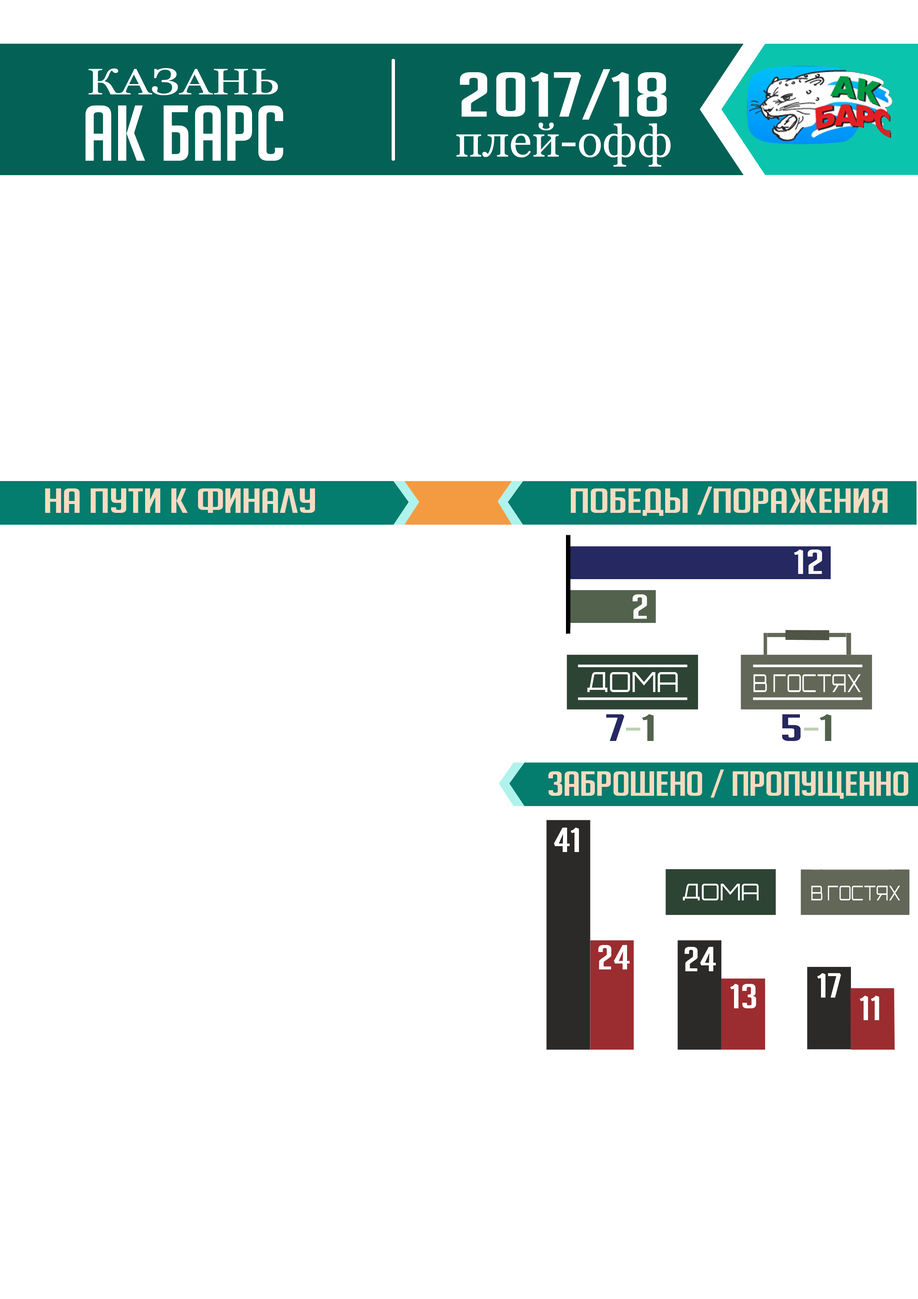
<style>
.page{position:relative;width:918px;height:1299px;background:#ffffff}
.page>*{position:absolute;margin:0}
.t1{font:37px "Georgia";color:#ffffff;scale:1.28 1}
.t2{font:37px "Georgia";color:#ffffff;scale:1.22 1}
.t3{font:61.7px "BigNoodleTitlingCyr";color:#ffffff;scale:1.57 1}
.t4{font:77.1px "BigNoodleTitlingCyr";color:#ffffff;scale:1.1 1}
.t5{font:46.3px "Georgia";color:#ffffff}
.t6{font:33.9px "BigNoodleTitlingCyr";color:#f7dbc0;scale:1.51 1}
.t7{font:33.9px "BigNoodleTitlingCyr";color:#fafafa;scale:1.51 1}
.t8{font:27.8px "Orbitron-Regular";color:#ffffff}
.t9{font:24.7px "Orbitron-Regular";color:#ffffff;scale:0.75 1}
.t10{font:37px "BigNoodleTitlingCyr";color:#262861;scale:1.75 1}
.t11{font:37px "BigNoodleTitlingCyr";color:#bdd0b5;scale:1.75 1}
.t12{font:37px "BigNoodleTitlingCyr";color:#53624d;scale:1.75 1}
.t13{font:33.9px "BigNoodleTitlingCyr";color:#f7dbc0;scale:1.35 1}
.t14{font:33.9px "BigNoodleTitlingCyr";color:#ffffff;scale:1.35 1}
</style>
<div class="page">
<p class="t1" style="left:88px;top:68px;width:190px;height:27px">КАЗАН<span class="t2">Ь</span></p>
<p class="t3" style="left:460px;top:69px;width:207px;height:51px">2017/18</p>
<p class="t4" style="left:86px;top:105px;width:197px;height:56px">АК БАРС</p>
<p class="t5" style="left:456px;top:123px;width:215px;height:44px">плей-офф</p>
<p class="t6" style="left:45px;top:488px;width:270px;height:25px">на пути к финалу</p>
<p class="t6" style="left:571px;top:486px;width:317px;height:30px">победы /поражения</p>
<p class="t7" style="left:794px;top:549px;width:28px;height:25px">12</p>
<p class="t7" style="left:633px;top:594px;width:14px;height:25px">2</p>
<p class="t8" style="left:587px;top:672px;width:91px;height:20px">ДОМА</p>
<p class="t9" style="left:753px;top:674px;width:108px;height:18px">В ГОСТЯХ</p>
<p class="t10" style="left:606px;top:714px;width:48px;height:27px">7<span class="t11">-</span><span class="t12">1</span></p>
<p class="t10" style="left:782px;top:714px;width:50px;height:27px">5<span class="t11">-</span><span class="t12">1</span></p>
<p class="t13" style="left:548px;top:769px;width:361px;height:30px">заброшено / пропущенно</p>
<p class="t14" style="left:554px;top:827px;width:25px;height:25px">41</p>
<p class="t14" style="left:598px;top:945px;width:32px;height:24px">24</p>
<p class="t14" style="left:685px;top:947px;width:31px;height:24px">24</p>
<p class="t14" style="left:817px;top:973px;width:24px;height:24px">17</p>
<p class="t14" style="left:730px;top:984px;width:26px;height:24px">13</p>
<p class="t14" style="left:860px;top:996px;width:19px;height:24px">11</p>
</div>
